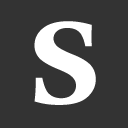
<style>
.page{position:relative;width:128px;height:128px;background:#333333}
.page>*{position:absolute;margin:0}
.t1{font:115.7px "CalisMTBol";color:#ffffff;scale:1.12 1}
</style>
<div class="page">
<p class="t1" style="left:34px;top:21px;width:62px;height:84px">S</p>
</div>
